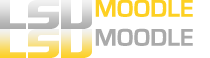
<style>
.page{position:relative;width:210px;height:58px;background:#ffffff}
.page>*{position:absolute;margin:0}
.t1{font:36.1px "GeauxExtended";letter-spacing:0.025em}
.t2{font:25px "EurostileBold";letter-spacing:0.025em;color:#fdd023}
.t3{font:25px "EurostileBold";letter-spacing:0.025em;color:#aaaaaa}
</style>
<div class="page">
<p class="t1" style="left:0px;top:0px;width:92px;height:29px">LSU</p>
<p class="t2" style="left:95px;top:0px;width:98px;height:17px">MOODLE</p>
<p class="t1" style="left:0px;top:29px;width:92px;height:29px">LSU</p>
<p class="t3" style="left:95px;top:28px;width:98px;height:18px">MOODLE</p>
</div>
